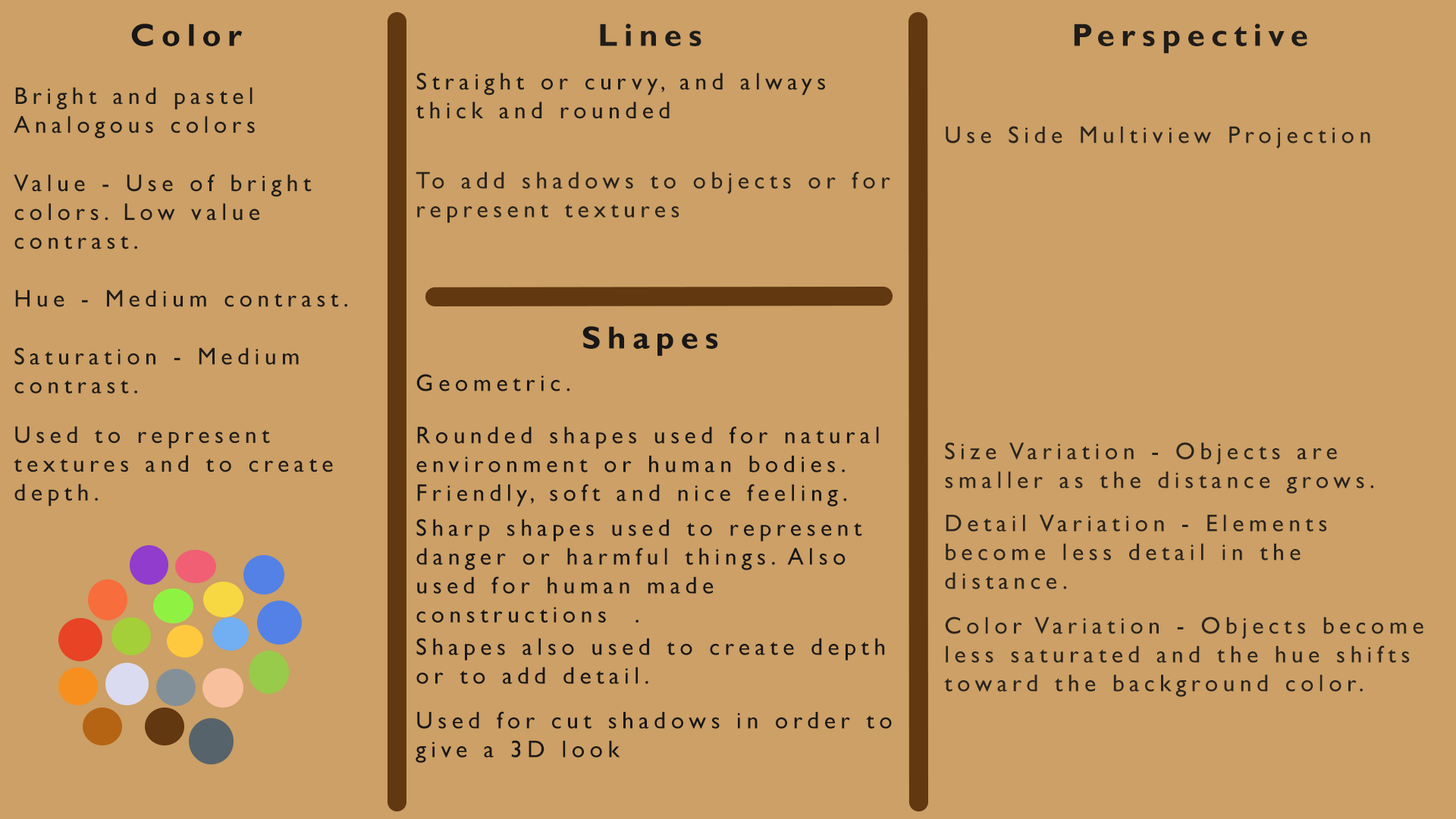
<style>
.page{position:relative;width:1456px;height:819px;background:#cca066}
.page>*{position:absolute;margin:0}
.t1{font:32.1px "GillSansMT-Bold";letter-spacing:0.2em;color:#191717}
.t2{font:32.1px "GillSansMT-Bold";letter-spacing:0.2em;color:#1f1c19}
.t3{font:24.1px "GillSansMT";letter-spacing:0.2em;color:#1f1c19}
.t4{font:24.1px "GillSansMT";letter-spacing:0.2em;color:#2a241e}
.t5{font:24.1px "GillSansMT";letter-spacing:0.2em;color:#191717}
</style>
<div class="page">
<p class="t1" style="left:131px;top:24px;width:111px;height:22px">Color</p>
<p class="t2" style="left:600px;top:24px;width:101px;height:22px">Lines</p>
<p class="t2" style="left:1074px;top:24px;width:233px;height:30px">Perspective</p>
<p class="t3" style="left:416px;top:73px;width:409px;height:46px">Straight or curvy, and always thick and rounded</p>
<p class="t3" style="left:14px;top:87px;width:241px;height:52px">Bright and pastel Analogous colors</p>
<p class="t4" style="left:946px;top:126px;width:424px;height:23px">Use Side Multiview Projection</p>
<p class="t4" style="left:416px;top:171px;width:474px;height:52px">To add shadows to objects or for represent textures</p>
<p class="t3" style="left:14px;top:174px;width:333px;height:220px">Value - Use of bright colors. Low value contrast.<br><br>Hue - Medium contrast.<br><br>Saturation - Medium contrast.</p>
<p class="t1" style="left:582px;top:326px;width:136px;height:30px">Shapes</p>
<p class="t5" style="left:416px;top:374px;width:154px;height:17px">Geometric.</p>
<p class="t3" style="left:14px;top:426px;width:319px;height:81px">Used to represent textures and to create depth.</p>
<p class="t5" style="left:416px;top:426px;width:463px;height:81px">Rounded shapes used for natural environment or human bodies.  Friendly, soft and nice feeling.</p>
<p class="t4" style="left:945px;top:442px;width:429px;height:52px">Size Variation - Objects are smaller as the distance grows.</p>
<p class="t5" style="left:416px;top:519px;width:446px;height:104px">Sharp shapes used to represent danger or harmful things. Also used for human made constructions  .</p>
<p class="t4" style="left:945px;top:514px;width:382px;height:75px">Detail Variation - Elements become less detail in the distance.</p>
<p class="t4" style="left:944px;top:617px;width:479px;height:80px">Color Variation - Objects become less saturated and the hue shifts toward the background color.</p>
<p class="t5" style="left:416px;top:638px;width:469px;height:46px">Shapes also used to create depth or to add detail.</p>
<p class="t5" style="left:416px;top:711px;width:476px;height:52px">Used for cut shadows in order to give a 3D look</p>
</div>
